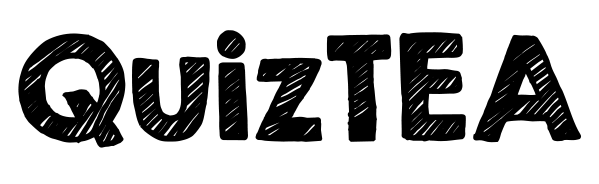
<style>
.page{position:relative;width:599px;height:184px;background:#ffffff}
.page>*{position:absolute;margin:0}
.t1{font:125px "KGSecondChancesSketch";color:#000000;font-weight:bold}
</style>
<div class="page">
<p class="t1" style="left:18px;top:30px;width:564px;height:118px">QuizTEA</p>
</div>
